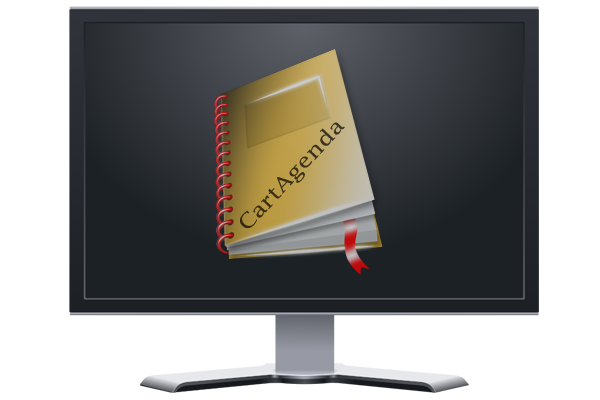
<style>
.page{position:relative;width:600px;height:400px;background:#ffffff}
.page>*{position:absolute;margin:0}
.t1{font:20.6px "LucidaFax";color:#393017;scale:1.19 1}
</style>
<div class="page">
<p class="t1" style="left:240px;top:122px;width:105px;height:106px;rotate:-47deg">CartAgenda</p>
</div>
